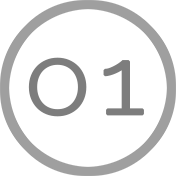
<style>
.page{position:relative;width:176px;height:176px;background:#ffffff}
.page>*{position:absolute;margin:0}
.t1{font:92px "Raleway-Light";letter-spacing:0.05em;color:#7d7d7d;font-variant:small-caps;font-weight:bold;scale:1.2 1}
</style>
<div class="page">
<p class="t1" style="left:28px;top:57px;width:116px;height:60px">01</p>
</div>
